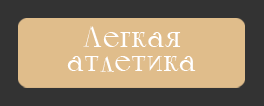
<style>
.page{position:relative;width:264px;height:106px;background:#e0bd8b}
.page>*{position:absolute;margin:0}
.t1{font:30px/24px "Calypso-Regular";color:#ffffff}
</style>
<div class="page">
<p class="t1" style="left:67px;top:26px;width:129px;height:46px;text-align:center">Легкая<br>атлетика</p>
</div>
